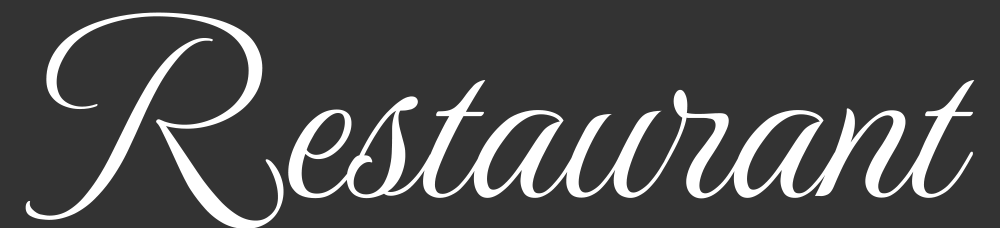
<style>
.page{position:relative;width:1000px;height:228px;background:#333333}
.page>*{position:absolute;margin:0}
.t1{font:261.8px "MonteCarlo-Regular";color:#ffffff}
</style>
<div class="page">
<p class="t1" style="left:25px;top:12px;width:950px;height:217px">Restaurant</p>
</div>
